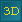
<style>
.page{position:relative;width:22px;height:22px}
.page>*{position:absolute;margin:0}
.t1{font:14px "Courier";color:#e6d22c}
</style>
<div class="page">
<p class="t1" style="left:4px;top:7px;width:15px;height:8px">3D</p>
</div>
